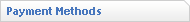
<style>
.page{position:relative;width:190px;height:22px}
.page>*{position:absolute;margin:0}
.t1{font:11px "TrebuchetMS-Bold";letter-spacing:0.005em;color:#4776bd}
</style>
<div class="page">
<p class="t1" style="left:7px;top:7px;width:94px;height:10px">Payment Methods</p>
</div>
